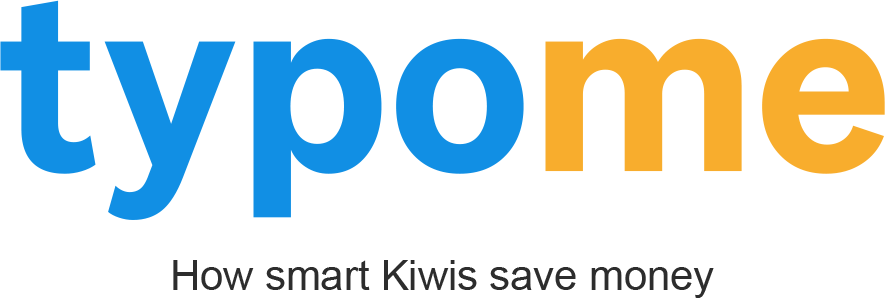
<style>
.page{position:relative;width:885px;height:298px;background:#ffffff}
.page>*{position:absolute;margin:0}
.t1{font:246.5px "CopyrightKlimTypeFoundry-NotLicensedforDesktopUse";color:#118fe4}
.t2{font:246.5px "CopyrightKlimTypeFoundry-NotLicensedforDesktopUse";color:#f8ad2d}
.t3{font:41.7px "ArialMT";color:#2d2d2d}
</style>
<div class="page">
<p class="t1" style="left:0px;top:0px;width:885px;height:220px">typo<span class="t2">me</span></p>
<p class="t3" style="left:173px;top:260px;width:541px;height:38px">How smart Kiwis save money</p>
</div>
